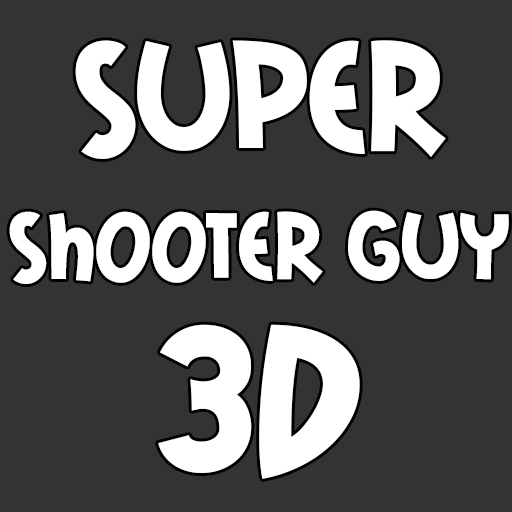
<style>
.page{position:relative;width:512px;height:512px;background:#333333}
.page>*{position:absolute;margin:0}
.t1{font:150px "MailRayStuff-Regular";color:#ffffff}
.t2{font:91.8px "MailRayStuff-Regular";color:#ffffff}
.t3{font:200px "MailRayStuff-Regular";color:#ffffff}
</style>
<div class="page">
<p class="t1" style="left:75px;top:40px;width:371px;height:119px">Super</p>
<p class="t2" style="left:9px;top:210px;width:500px;height:74px">shooter Guy</p>
<p class="t3" style="left:158px;top:324px;width:202px;height:155px">3D</p>
</div>
